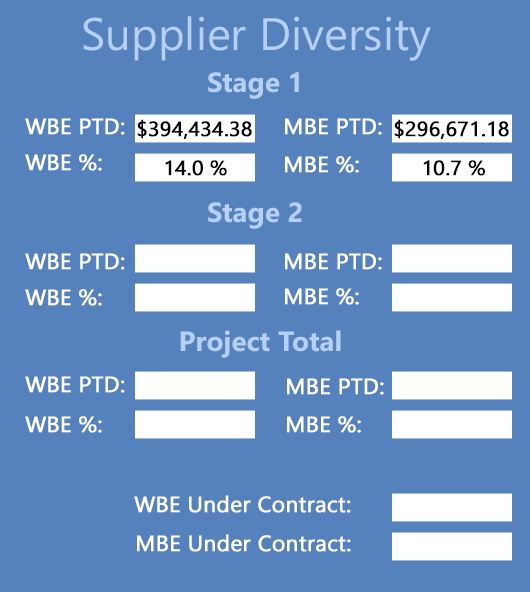
<style>
.page{position:relative;width:530px;height:592px;background:#5581bc}
.page>*{position:absolute;margin:0}
.t1{font:45.6px "Gadugi";color:#b6d0f5}
.t2{font:27.8px "Gadugi-Bold";color:#b6d0f5}
.t3{font:22.2px "Gadugi";color:#ffffff;font-weight:bold}
.t4{font:20.8px "Gadugi";color:#000000;font-weight:bold}
.t5{font:27.8px "Gadugi-Bold";color:#b5cff5}
</style>
<div class="page">
<p class="t1" style="left:83px;top:16px;width:348px;height:45px">Supplier Diversity</p>
<p class="t2" style="left:208px;top:72px;width:91px;height:27px">Stage 1</p>
<p class="t3" style="left:25px;top:118px;width:100px;height:17px">WBE PTD:</p>
<p class="t4" style="left:137px;top:119px;width:115px;height:20px">$394,434.38</p>
<p class="t3" style="left:285px;top:118px;width:97px;height:17px">MBE PTD:</p>
<p class="t4" style="left:394px;top:119px;width:115px;height:20px">$296,671.18</p>
<p class="t3" style="left:25px;top:154px;width:77px;height:17px">WBE %:</p>
<p class="t4" style="left:165px;top:160px;width:62px;height:16px">14.0 %</p>
<p class="t3" style="left:285px;top:156px;width:74px;height:17px">MBE %:</p>
<p class="t4" style="left:423px;top:160px;width:62px;height:16px">10.7 %</p>
<p class="t5" style="left:208px;top:202px;width:94px;height:27px">Stage 2</p>
<p class="t3" style="left:25px;top:253px;width:100px;height:17px">WBE PTD:</p>
<p class="t3" style="left:285px;top:253px;width:97px;height:17px">MBE PTD:</p>
<p class="t3" style="left:25px;top:289px;width:77px;height:17px">WBE %:</p>
<p class="t3" style="left:285px;top:288px;width:74px;height:17px">MBE %:</p>
<p class="t2" style="left:180px;top:330px;width:161px;height:28px">Project Total</p>
<p class="t3" style="left:25px;top:376px;width:100px;height:17px">WBE PTD:</p>
<p class="t3" style="left:287px;top:378px;width:97px;height:17px">MBE PTD:</p>
<p class="t3" style="left:25px;top:416px;width:77px;height:17px">WBE %:</p>
<p class="t3" style="left:287px;top:416px;width:74px;height:17px">MBE %:</p>
<p class="t3" style="left:134px;top:495px;width:217px;height:18px">WBE Under Contract:</p>
<p class="t3" style="left:137px;top:534px;width:214px;height:18px">MBE Under Contract:</p>
</div>
